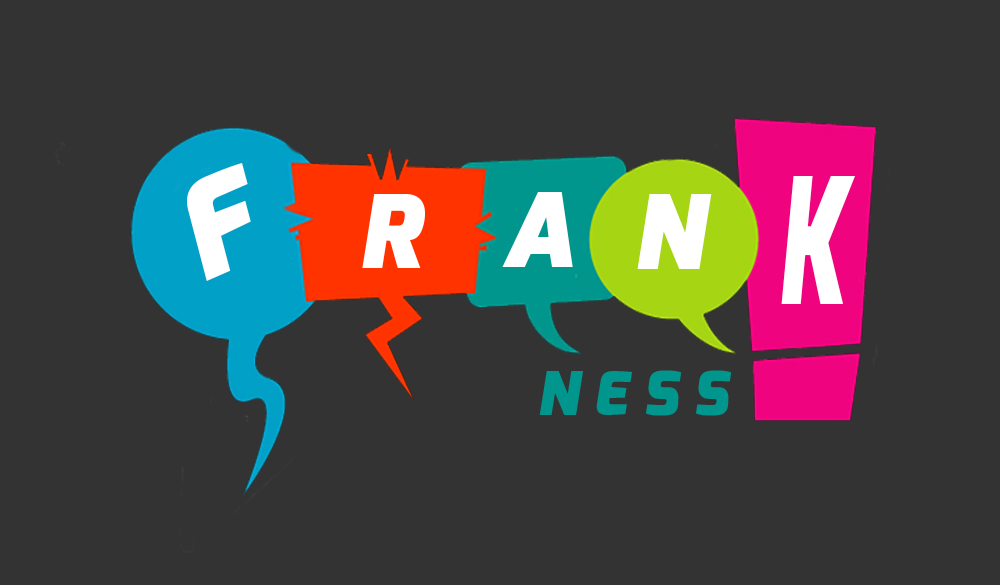
<style>
.page{position:relative;width:1000px;height:585px;background:#333333}
.page>*{position:absolute;margin:0}
.t1{font:131.1px "Exo-BlackItalic";letter-spacing:0.03em;color:#ffffff;text-transform:uppercase}
.t2{font:175.5px "Exo-BlackItalic";letter-spacing:0.03em;color:#ffffff;text-transform:uppercase;scale:0.59 1}
.t3{font:101.5px "Exo-BlackItalic";letter-spacing:0.03em;color:#ffffff;text-transform:uppercase}
.t4{font:102.9px "Exo-BlackItalic";letter-spacing:0.03em;color:#ffffff;text-transform:uppercase}
.t5{font:60.6px "Exo-BlackItalic";letter-spacing:0.25em;color:#00968d;text-transform:uppercase}
</style>
<div class="page">
<p class="t1" style="left:187px;top:163px;width:64px;height:118px;rotate:-24deg">f</p>
<p class="t2" style="left:781px;top:176px;width:74px;height:128px">k</p>
<p class="t3" style="left:362px;top:194px;width:63px;height:74px">r</p>
<p class="t4" style="left:502px;top:192px;width:71px;height:75px">a</p>
<p class="t4" style="left:637px;top:194px;width:75px;height:75px">n</p>
<p class="t5" style="left:539px;top:370px;width:193px;height:46px">ness</p>
</div>
